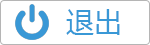
<style>
.page{position:relative;width:150px;height:45px;background:#ffffff}
.page>*{position:absolute;margin:0}
.t1{font:28px "MicrosoftYaHei";color:#3998d6}
</style>
<div class="page">
<p class="t1" style="left:66px;top:9px;width:54px;height:26px">退出</p>
</div>
